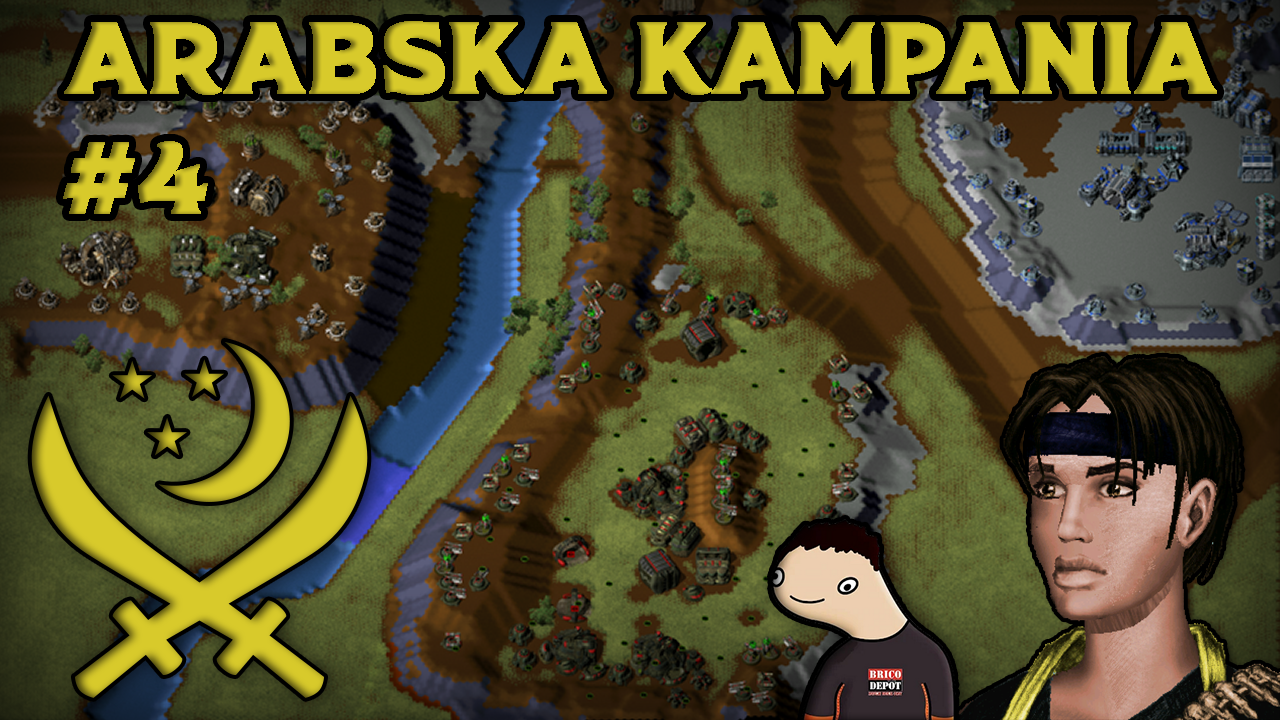
<style>
.page{position:relative;width:1280px;height:720px}
.page>*{position:absolute;margin:0}
.t1{font:100px "Rodfat-Two-Demo";color:#d8ca2b;text-transform:uppercase;font-weight:bold}
</style>
<div class="page">
<p class="t1" style="left:63px;top:21px;width:1154px;height:193px">ARABSKA KAMPANIA<br>#4</p>
</div>
